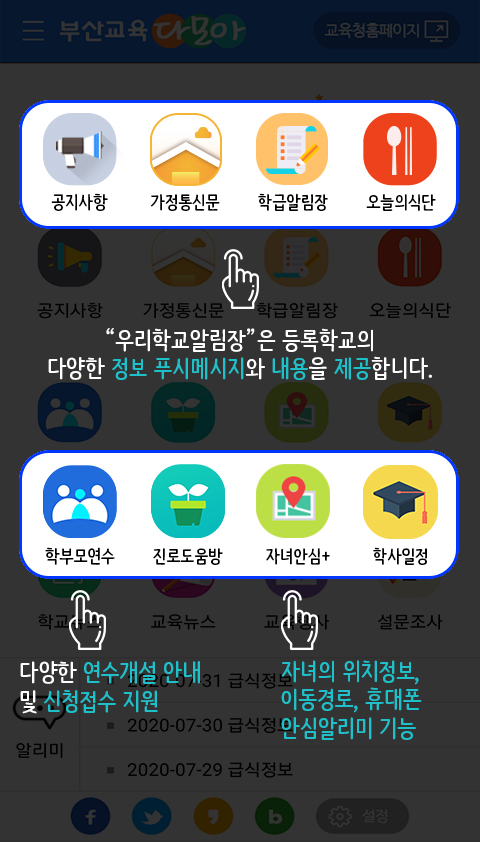
<style>
.page{position:relative;width:480px;height:842px;background:#333333}
.page>*{position:absolute;margin:0}
.t1{font:18px "NanumBarunpen-Bold";color:#000000}
.t2{font:24px "NanumBarunpen-Bold";color:#ffffff}
.t3{font:24px "NanumBarunpen-Bold";color:#1ec1ca}
</style>
<div class="page">
<p class="t1" style="left:51px;top:193px;width:385px;height:18px">공지사항         가정통신문        학급알림장        오늘의식단</p>
<p class="t2" style="left:48px;top:328px;width:384px;height:52px;text-align:center">“우리학교알림장”은 등록학교의<br>다양한 <span class="t3">정보 푸시메시지</span>와 <span class="t3">내용</span>을 <span class="t3">제공</span>합니다.</p>
<p class="t1" style="left:45px;top:547px;width:382px;height:18px">학부모연수        진로도움방         자녀안심+         학사일정</p>
<p class="t3" style="left:20px;top:661px;width:180px;height:53px"><span class="t2">다양한 </span>연수개설 안내<br><span class="t2">및 </span>신청접수 지원</p>
<p class="t3" style="left:281px;top:660px;width:141px;height:80px">자녀의 위치정보,<br>이동경로, 휴대폰<br>안심알리미 기능</p>
</div>
